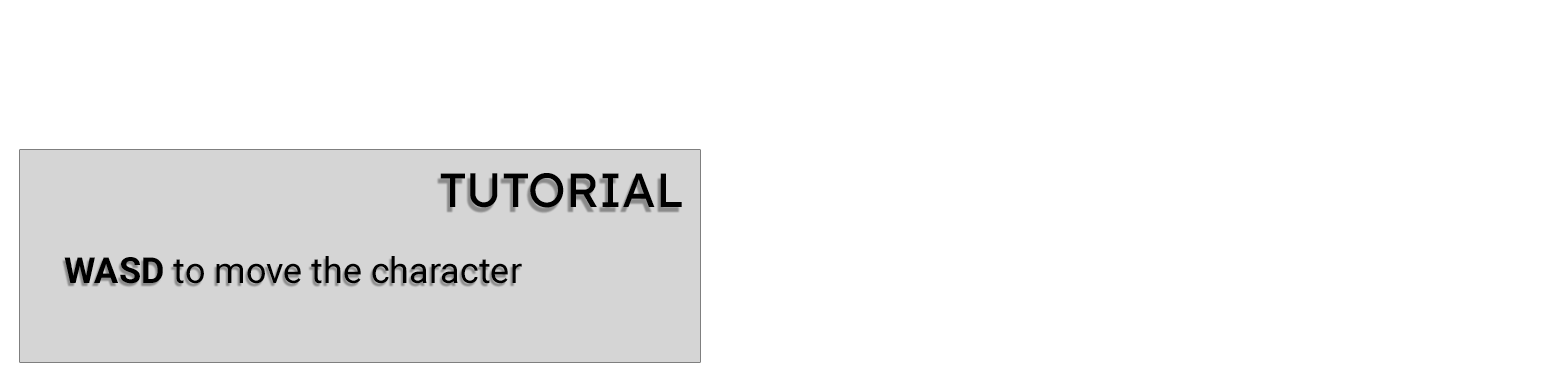
<style>
.page{position:relative;width:1564px;height:373px;background:#ffffff}
.page>*{position:absolute;margin:0}
.t1{font:48px "LexendDeca-Regular";color:#000000}
.t2{font:36px "Roboto-Regular";color:#000000}
.t3{font:36px "Roboto-Bold";color:#000000}
</style>
<div class="page">
<p class="t1" style="left:440px;top:173px;width:242px;height:35px">TUTORIAL</p>
<p class="t2" style="left:64px;top:256px;width:458px;height:28px"><span class="t3">WASD</span> to move the character</p>
</div>
